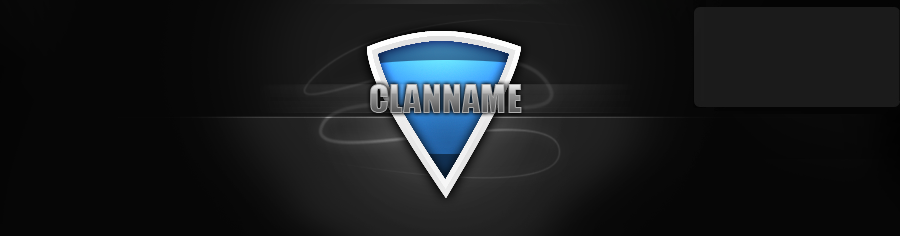
<style>
.page{position:relative;width:900px;height:236px;background:#060606}
.page>*{position:absolute;margin:0}
.t1{font:37.1px "Impact";letter-spacing:0.01em}
</style>
<div class="page">
<p class="t1" style="left:370px;top:84px;width:152px;height:29px">CLANNAME</p>
</div>
